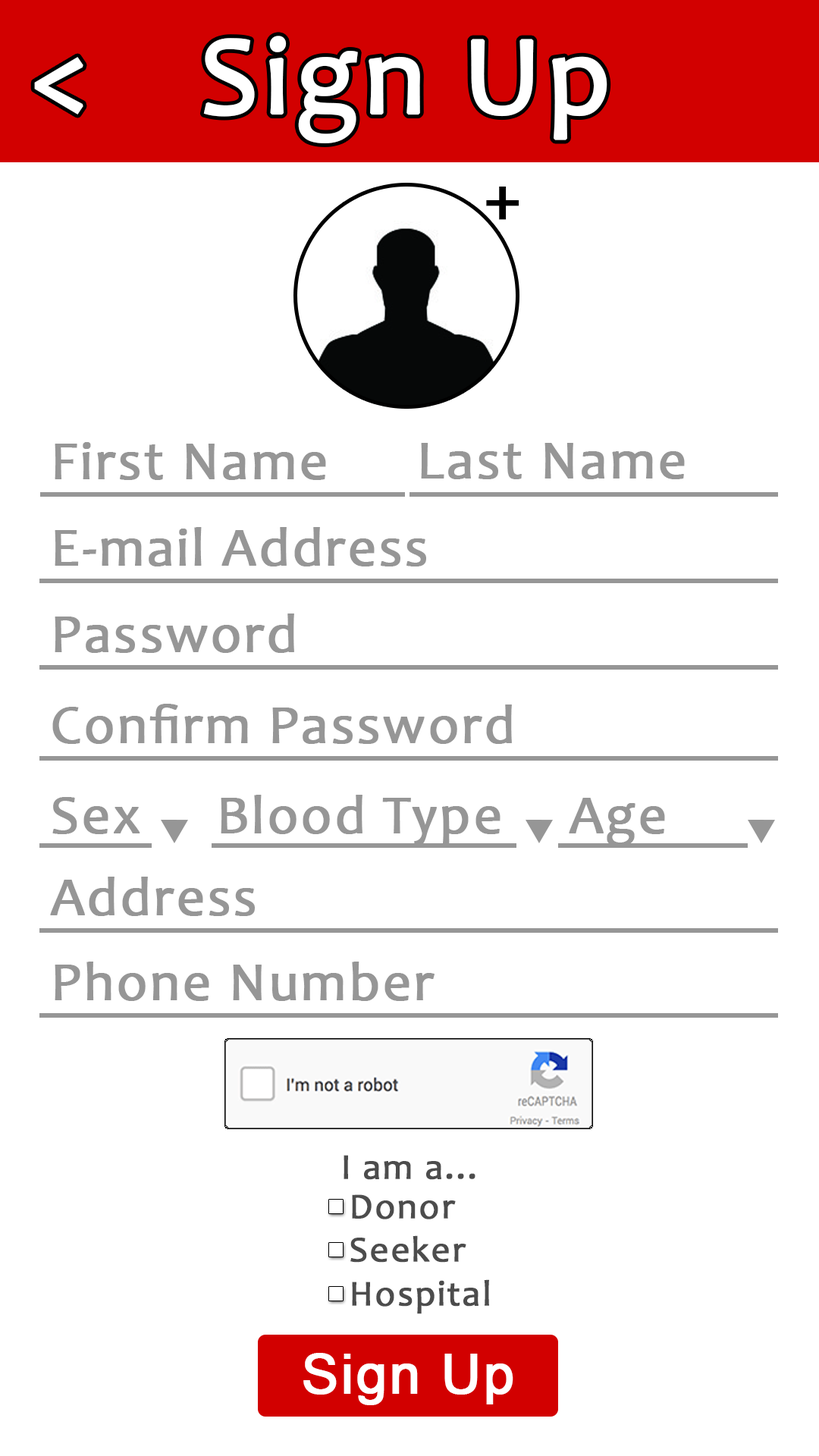
<style>
.page{position:relative;width:819px;height:1456px;background:#ffffff}
.page>*{position:absolute;margin:0}
.t1{font:113.4px "Candara";letter-spacing:0.03em;color:#ffffff;font-weight:bold}
.t2{font:113.7px "Candara";letter-spacing:0.03em;color:#ffffff;font-weight:bold}
.t3{font:75.8px "Candara";letter-spacing:0.03em;color:#000000;font-weight:bold}
.t4{font:54.6px "Candara";letter-spacing:0.03em;color:#969696;font-weight:bold}
.t5{font:36.4px "Candara";letter-spacing:0.03em;color:#4c4c4c;font-weight:bold}
.t6{font:54.6px "ArialMT";letter-spacing:0.03em;color:#ffffff;font-weight:bold}
</style>
<div class="page">
<p class="t1" style="left:203px;top:36px;width:404px;height:107px">Sign Up</p>
<p class="t2" style="left:34px;top:57px;width:49px;height:58px">&lt;</p>
<p class="t3" style="left:486px;top:187px;width:33px;height:33px">+</p>
<p class="t4" style="left:55px;top:442px;width:271px;height:38px">First Name</p>
<p class="t4" style="left:421px;top:443px;width:264px;height:36px">Last Name</p>
<p class="t4" style="left:55px;top:527px;width:371px;height:39px">E-mail Address</p>
<p class="t4" style="left:55px;top:613px;width:239px;height:40px">Password</p>
<p class="t4" style="left:52px;top:704px;width:460px;height:40px">Confirm Password</p>
<p class="t4" style="left:52px;top:797px;width:88px;height:37px">Sex</p>
<p class="t4" style="left:221px;top:795px;width:279px;height:51px">Blood Type</p>
<p class="t4" style="left:569px;top:798px;width:96px;height:48px">Age</p>
<p class="t4" style="left:50px;top:877px;width:205px;height:39px">Address</p>
<p class="t4" style="left:55px;top:962px;width:380px;height:39px">Phone Number</p>
<p class="t5" style="left:344px;top:1155px;width:131px;height:25px">I am a...</p>
<p class="t5" style="left:350px;top:1194px;width:139px;height:120px">Donor<br>Seeker<br>Hospital</p>
<p class="t6" style="left:303px;top:1353px;width:210px;height:52px">Sign Up</p>
</div>
